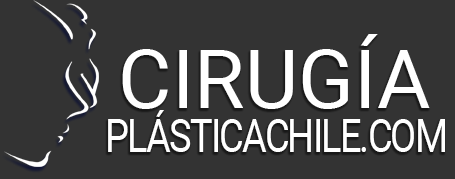
<style>
.page{position:relative;width:455px;height:179px;background:#333333}
.page>*{position:absolute;margin:0}
.t1{font:82px "Roboto-Regular";color:#ffffff}
.t2{font:45.6px "Roboto-Regular";letter-spacing:-0.05em;color:#ffffff;scale:0.83 1}
</style>
<div class="page">
<p class="t1" style="left:122px;top:34px;width:308px;height:75px">CIRUGÍA</p>
<p class="t2" style="left:108px;top:110px;width:337px;height:42px">PLÁSTICACHILE.COM</p>
</div>
